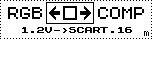
<style>
.page{position:relative;width:152px;height:72px;background:#ffffff}
.page>*{position:absolute;margin:0}
.t1{font:16px "ZX 6x8";color:#000000}
.t2{font:8px "Speccy";color:#000000}
.t3{font:8px "ZX 6x8";color:#000000}
</style>
<div class="page">
<p class="t1" style="left:8px;top:7px;width:34px;height:12px">RGB</p>
<p class="t1" style="left:98px;top:7px;width:46px;height:12px">COMP</p>
<p class="t2" style="left:22px;top:27px;width:109px;height:6px">1.2V-&gt;SCART.16</p>
<p class="t2" style="left:23px;top:27px;width:109px;height:6px">1.2V-&gt;SCART.16</p>
<p class="t3" style="left:144px;top:31px;width:5px;height:5px">m</p>
</div>
